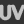
<style>
.page{position:relative;width:24px;height:24px;background:#333333}
.page>*{position:absolute;margin:0}
.t1{font:21px "LucidaConsole";color:#c3c3c3}
</style>
<div class="page">
<p class="t1" style="left:0px;top:5px;width:24px;height:15px">UV</p>
</div>
